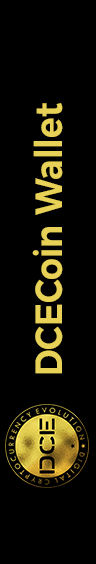
<style>
.page{position:relative;width:96px;height:564px;background:#000000}
.page>*{position:absolute;margin:0}
.t1{font:38px "Montserrat-SemiBold";color:#e7d156;scale:0.9 1}
</style>
<div class="page">
<p class="t1" style="left:32px;top:103px;width:31px;height:271px;rotate:-90deg">DCECoin Wallet</p>
</div>
